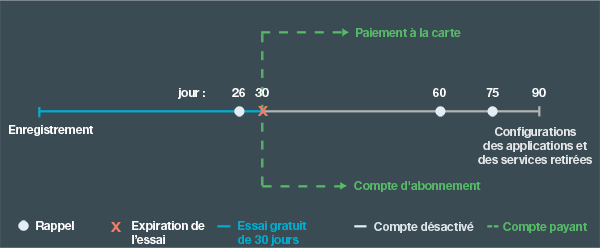
<style>
.page{position:relative;width:600px;height:248px;background:#3b4b54}
.page>*{position:absolute;margin:0}
.t1{font:11.9px "HelvNeueBoldforIBM";color:#56bb66}
.t2{font:11.9px "HelvNeueBoldforIBM";color:#ffffff}
.t3{font:12.7px "HelvNeueBoldforIBM";color:#f47d64;scale:1.17 1}
.t4{font:11.9px "HelvNeueBoldforIBM";color:#e5e7e8}
.t5{font:11.9px "HelvNeueBoldforIBM";color:#00aed1}
.t6{font:11.9px "HelvNeueBoldforIBM";color:#dfe6eb}
</style>
<div class="page">
<p class="t1" style="left:356px;top:27px;width:105px;height:10px">Paiement à la carte</p>
<p class="t2" style="left:178px;top:88px;width:27px;height:11px">jour :</p>
<p class="t2" style="left:232px;top:88px;width:13px;height:9px">26</p>
<p class="t2" style="left:255px;top:88px;width:14px;height:9px">30</p>
<p class="t2" style="left:433px;top:88px;width:13px;height:9px">60</p>
<p class="t2" style="left:486px;top:88px;width:13px;height:9px">75</p>
<p class="t2" style="left:532px;top:88px;width:14px;height:9px">90</p>
<p class="t3" style="left:258px;top:106px;width:10px;height:10px">X</p>
<p class="t2" style="left:9px;top:125px;width:84px;height:11px">Enregistrement</p>
<p class="t4" style="left:478px;top:127px;width:114px;height:37px;text-align:center">Configurations<br>des applications et<br>des services retirées</p>
<p class="t1" style="left:354px;top:181px;width:127px;height:11px">Compte d'abonnement</p>
<p class="t2" style="left:36px;top:221px;width:38px;height:11px">Rappel</p>
<p class="t3" style="left:111px;top:222px;width:10px;height:10px">X</p>
<p class="t2" style="left:132px;top:221px;width:73px;height:23px">Expiration de<br>l’essai</p>
<p class="t5" style="left:238px;top:221px;width:69px;height:25px">Essai gratuit<br>de 30 jours</p>
<p class="t6" style="left:374px;top:221px;width:100px;height:12px">Compte désactivé</p>
<p class="t1" style="left:503px;top:222px;width:84px;height:11px">Compte payant</p>
</div>
